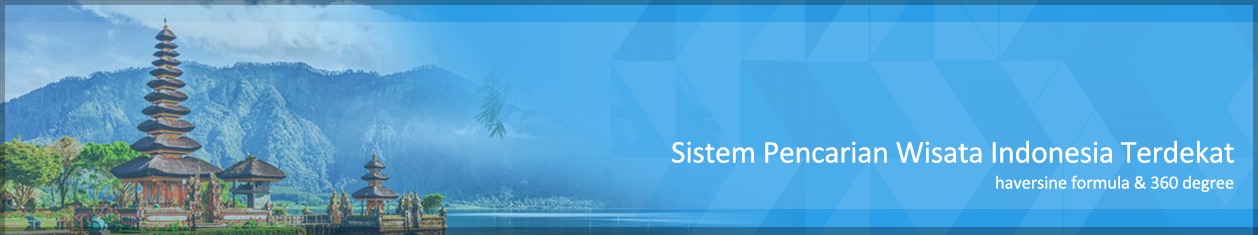
<style>
.page{position:relative;width:1258px;height:235px}
.page>*{position:absolute;margin:0}
.t1{font:32px "Calibri";letter-spacing:-0.01em;color:#ffffff}
.t2{font:18.7px "Calibri";letter-spacing:-0.01em;color:#ffffff}
</style>
<div class="page">
<p class="t1" style="left:672px;top:140px;width:562px;height:23px">Sistem Pencarian Wisata Indonesia Terdekat</p>
<p class="t2" style="left:996px;top:175px;width:238px;height:17px">haversine formula &amp; 360 degree</p>
</div>
